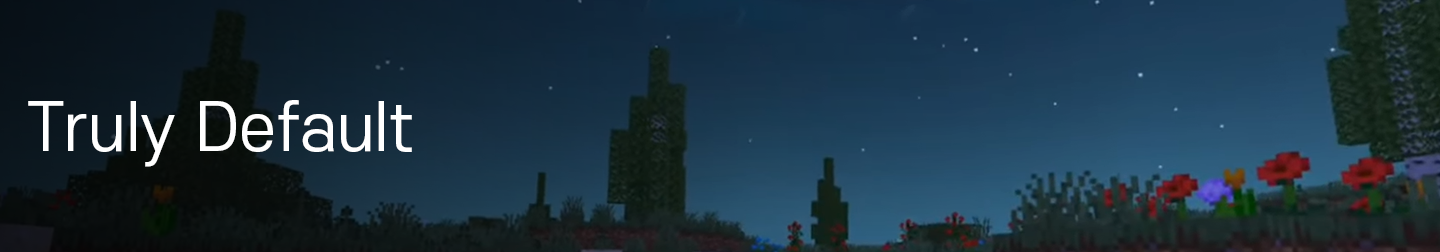
<style>
.page{position:relative;width:1440px;height:252px}
.page>*{position:absolute;margin:0}
.t1{font:64px "S-CoreDream-4Regular";color:#ffffff}
</style>
<div class="page">
<p class="t1" style="left:28px;top:100px;width:384px;height:67px">Truly Default</p>
</div>
